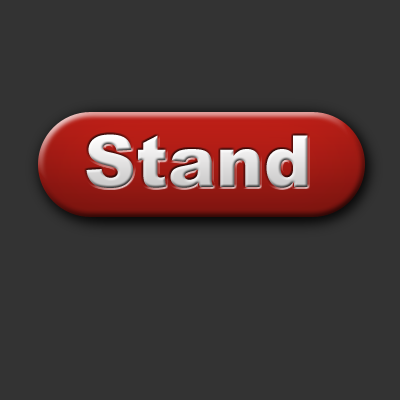
<style>
.page{position:relative;width:400px;height:400px;background:#333333}
.page>*{position:absolute;margin:0}
.t1{font:72px "Arial-Black"}
</style>
<div class="page">
<p class="t1" style="left:86px;top:134px;width:222px;height:54px">Stand</p>
</div>
